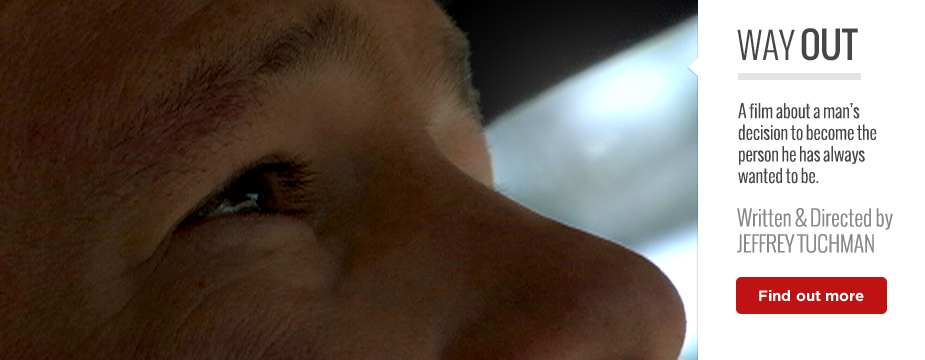
<style>
.page{position:relative;width:925px;height:360px;background:#ffffff}
.page>*{position:absolute;margin:0}
.t1{font:36px "Oswald-Light";letter-spacing:-0.01em;color:#464646;text-transform:uppercase}
.t2{font:36px "Oswald";letter-spacing:-0.01em;color:#464646;text-transform:uppercase}
.t3{font:18px "Oswald-Light";letter-spacing:-0.01em;color:#464646}
.t4{font:21.6px "Oswald-Light";letter-spacing:-0.01em;color:#898989}
.t5{font:15px "Gotham-Bold";letter-spacing:-0.01em;color:#ffffff}
</style>
<div class="page">
<p class="t1" style="left:737px;top:28px;width:121px;height:33px">WAY<span class="t2"> OUT</span></p>
<p class="t3" style="left:738px;top:103px;width:139px;height:81px">A film about a man’s decision to become the person he has always wanted to be.</p>
<p class="t4" style="left:737px;top:208px;width:156px;height:45px">Written &amp; Directed by<br>JEFFREY TUCHMAN</p>
<p class="t5" style="left:759px;top:290px;width:105px;height:12px">Find out more</p>
</div>
